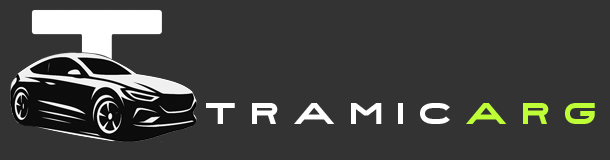
<style>
.page{position:relative;width:610px;height:160px;background:#333333}
.page>*{position:absolute;margin:0}
.t1{font:42px "helssanserif";color:#ffffff}
.t2{font:42px "helssanserif";color:#befe36}
</style>
<div class="page">
<p class="t1" style="left:206px;top:103px;width:389px;height:21px">Tramic<span class="t2">ARG</span></p>
</div>
